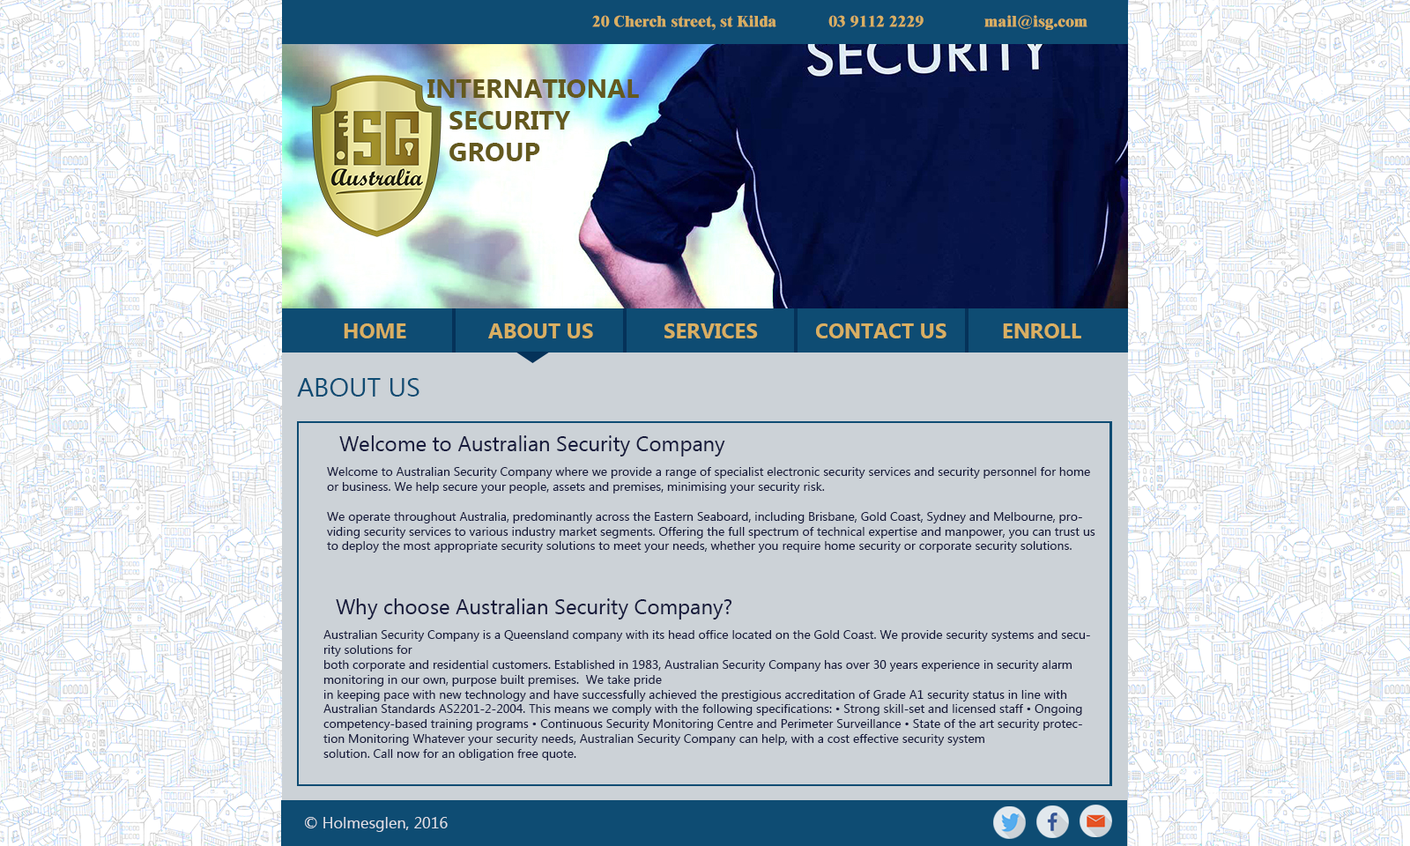
<style>
.page{position:relative;width:1410px;height:846px;background:#ccd2d7}
.page>*{position:absolute;margin:0}
.t1{font:15.9px "Dutch801BT-ExtraBold";color:#d9af62}
.t2{font:26.4px "Ebrima-Bold";color:#64591e}
.t3{font:26.4px "Ebrima-Bold";color:#ffffff}
.t4{font:21.1px "Ebrima-Bold";color:#d9af62}
.t5{font:26.4px "Ebrima";color:#0e4c73}
.t6{font:21.1px "Ebrima";color:#161a3c}
.t7{font:12.3px "Ebrima";color:#161a3c}
.t8{font:15.9px "Ebrima";color:#dfe0e7}
</style>
<div class="page">
<p class="t1" style="left:592px;top:15px;width:495px;height:16px">20 Cherch street, st Kilda            03 9112 2229              mail@isg.com</p>
<p class="t2" style="left:427px;top:79px;width:212px;height:82px">INTERNATIONAL<br>   SECURITY<br>   GROUP<span class="t3">P</span></p>
<p class="t4" style="left:344px;top:323px;width:62px;height:15px">HOME</p>
<p class="t4" style="left:488px;top:323px;width:105px;height:15px">ABOUT US</p>
<p class="t4" style="left:664px;top:323px;width:94px;height:15px">SERVICES</p>
<p class="t4" style="left:816px;top:323px;width:130px;height:15px">CONTACT US</p>
<p class="t4" style="left:1003px;top:323px;width:78px;height:15px">ENROLL</p>
<p class="t5" style="left:297px;top:378px;width:122px;height:18px">ABOUT US</p>
<p class="t6" style="left:339px;top:435px;width:386px;height:21px">Welcome to Australian Security Company</p>
<p class="t7" style="left:327px;top:467px;width:768px;height:85px">Welcome to Australian Security Company where we provide a range of specialist electronic security services and security personnel for home or business. We help secure your people, assets and premises, minimising your security risk.<br><br>We operate throughout Australia, predominantly across the Eastern Seaboard, including Brisbane, Gold Coast, Sydney and Melbourne, providing security services to various industry market segments. Offering the full spectrum of technical expertise and manpower, you can trust us to deploy the most appropriate security solutions to meet your needs, whether you require home security or corporate security solutions.</p>
<p class="t6" style="left:336px;top:598px;width:396px;height:21px">Why choose Australian Security Company?</p>
<p class="t7" style="left:323px;top:630px;width:767px;height:130px">Australian Security Company is a Queensland company with its head office located on the Gold Coast. We provide security systems and security solutions for <br>both corporate and residential customers. Established in 1983, Australian Security Company has over 30 years experience in security alarm monitoring in our own, purpose built premises.  We take pride <br>in keeping pace with new technology and have successfully achieved the prestigious accreditation of Grade A1 security status in line with Australian Standards AS2201-2-2004. This means we comply with the following specifications: • Strong skill-set and licensed staff • Ongoing competency-based training programs • Continuous Security Monitoring Centre and Perimeter Surveillance • State of the art security protection Monitoring Whatever your security needs, Australian Security Company can help, with a cost effective security system <br>solution. Call now for an obligation free quote.</p>
<p class="t8" style="left:305px;top:817px;width:143px;height:15px">© Holmesglen, 2016</p>
</div>
